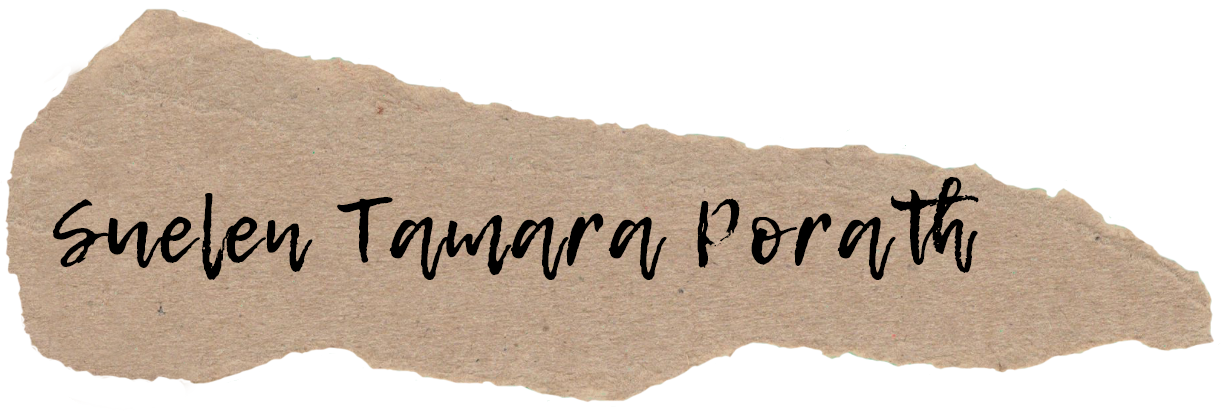
<style>
.page{position:relative;width:1221px;height:412px;background:#ffffff}
.page>*{position:absolute;margin:0}
.t1{font:90.3px "LemonTuesday";letter-spacing:0.05em;color:#000000}
</style>
<div class="page">
<p class="t1" style="left:53px;top:177px;width:926px;height:103px">Suelen Tamara Porath</p>
</div>
